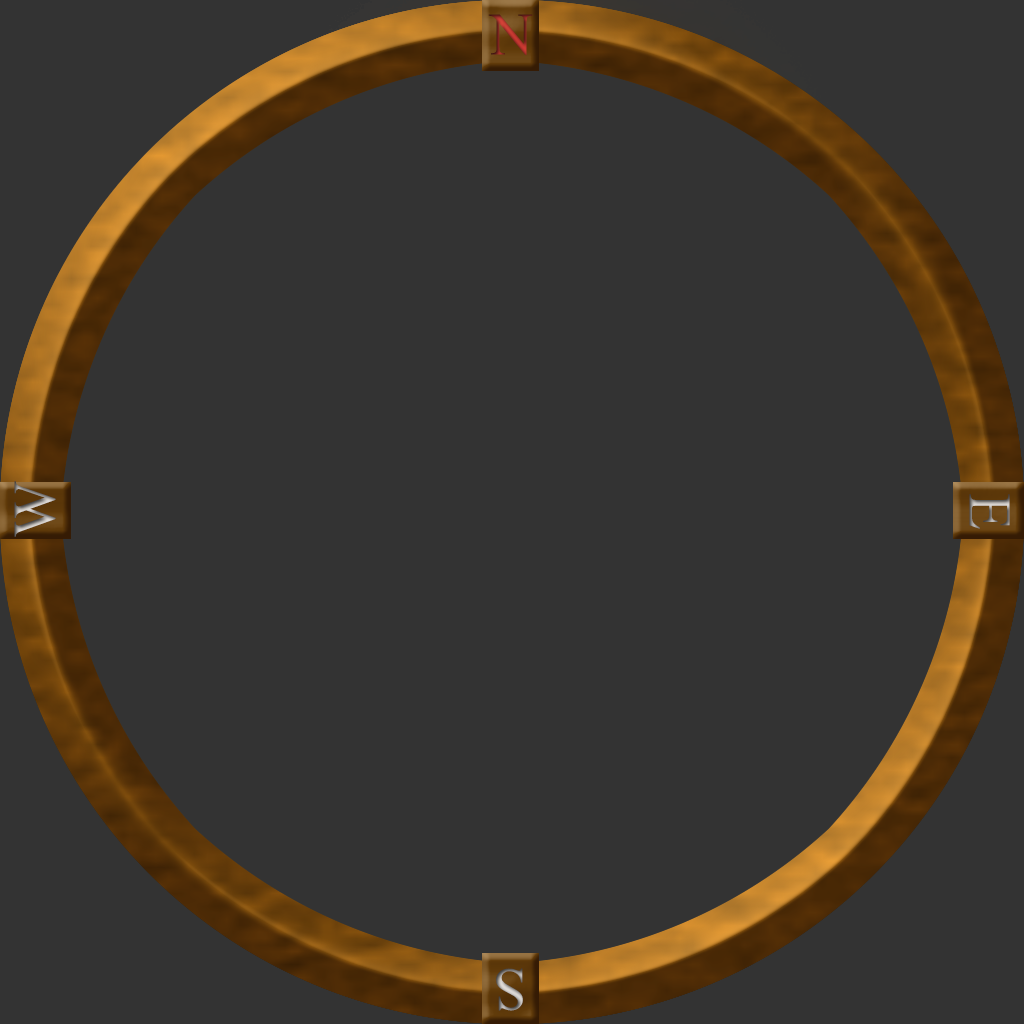
<style>
.page{position:relative;width:1024px;height:1024px;background:#333333}
.page>*{position:absolute;margin:0}
.t1{font:60px "MongolianBaiti"}
</style>
<div class="page">
<p class="t1" style="left:488px;top:14px;width:45px;height:41px">N</p>
<p class="t1" style="left:14px;top:481px;width:42px;height:56px;rotate:-90deg">W</p>
<p class="t1" style="left:969px;top:494px;width:41px;height:35px;rotate:90deg">E</p>
<p class="t1" style="left:496px;top:968px;width:27px;height:43px;rotate:180deg">S</p>
</div>
